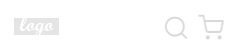
<style>
.page{position:relative;width:238px;height:53px;background:#ffffff}
.page>*{position:absolute;margin:0}
.t1{font:20px "ScriptMTBold";color:#ffffff}
</style>
<div class="page">
<p class="t1" style="left:20px;top:17px;width:34px;height:19px">logo</p>
</div>
